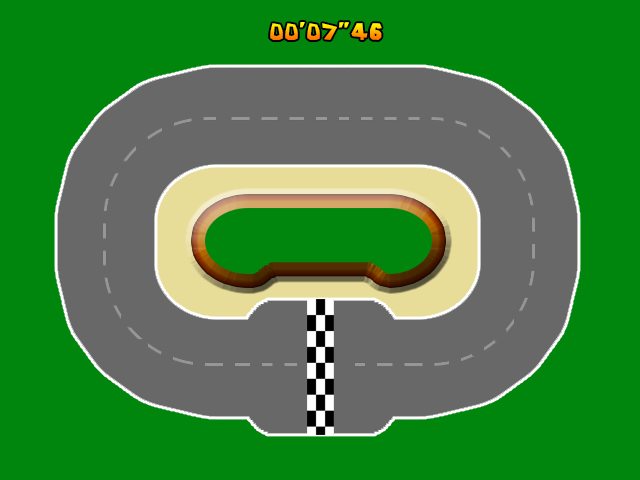
<style>
.page{position:relative;width:640px;height:480px;background:#00860d}
.page>*{position:absolute;margin:0}
.t1{font:24px "PipeDream"}
</style>
<div class="page">
<p class="t1" style="left:270px;top:22px;width:112px;height:18px">00’07”46</p>
</div>
